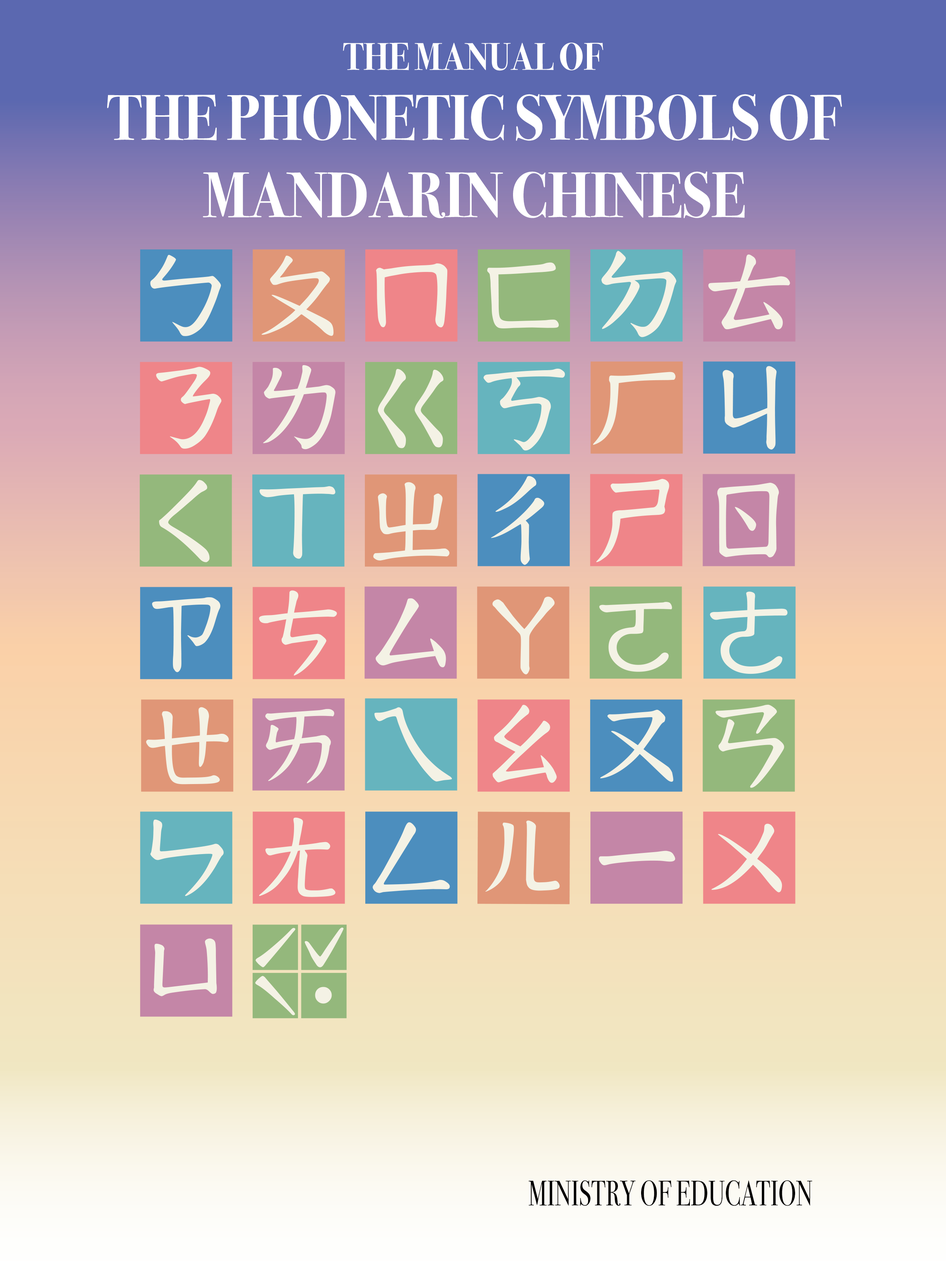
<style>
.page{position:relative;width:946px;height:1261px}
.page>*{position:absolute;margin:0}
.t1{font:38.7px "BodoniSvtyTwoOSITCTT-Bold";color:#ffffff;text-transform:uppercase;scale:0.9 1}
.t2{font:64.5px/77.4px "BodoniSvtyTwoOSITCTT-Bold";color:#ffffff;text-transform:uppercase;scale:0.9 1}
.t3{font:35.5px "BodoniSvtyTwoOSITCTT-Book";color:#010000;text-transform:uppercase;scale:0.7 1}
</style>
<div class="page">
<p class="t1" style="left:343px;top:43px;width:260px;height:28px">The Manual of</p>
<p class="t2" style="left:107px;top:94px;width:735px;height:124px;text-align:center">the Phonetic Symbols of <br>Mandarin Chinese</p>
<p class="t3" style="left:528px;top:1180px;width:284px;height:26px">MINISTRY OF EDUCATION</p>
</div>
